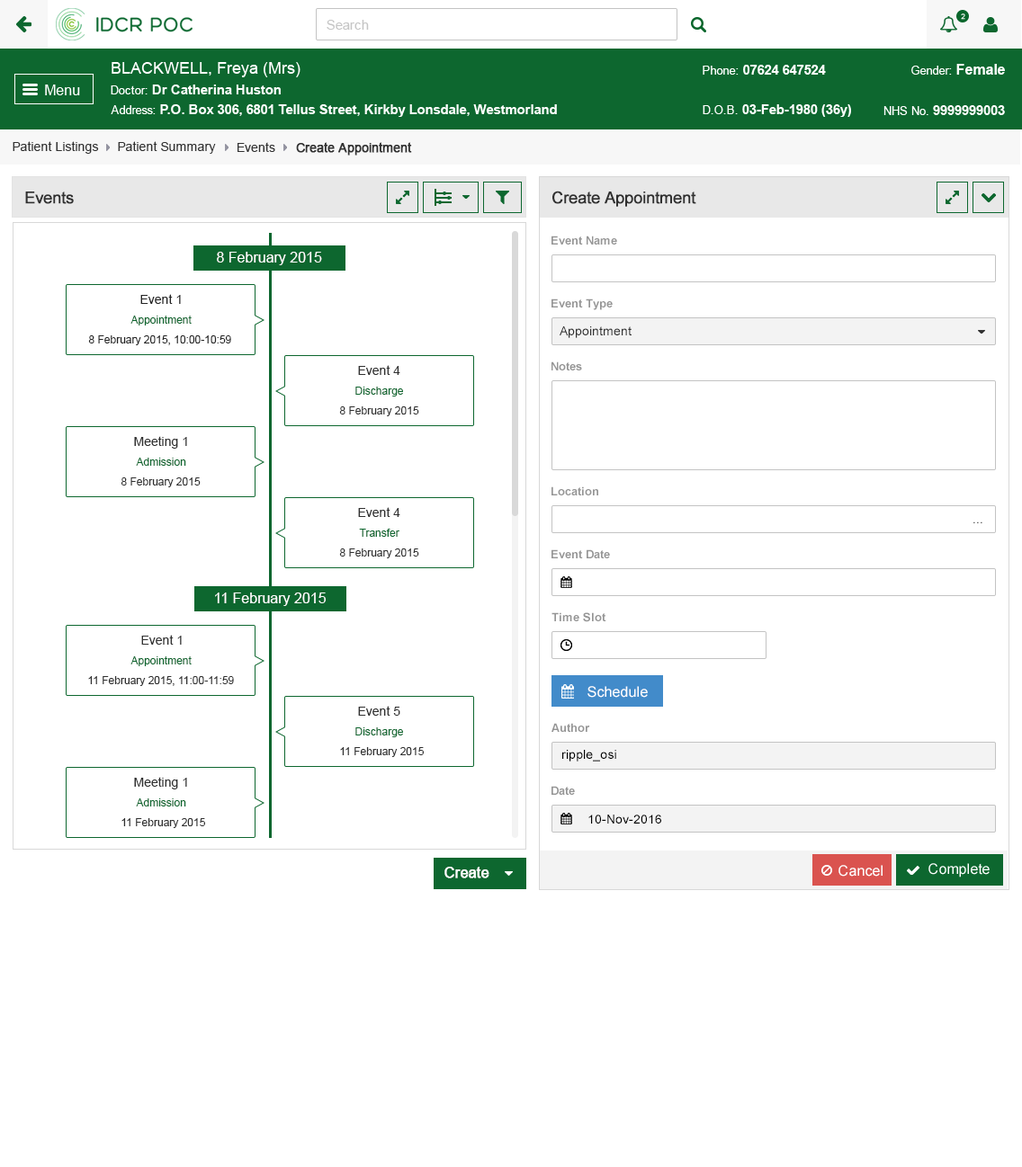
<style>
.page{position:relative;width:1022px;height:1167px;background:#ffffff}
.page>*{position:absolute;margin:0}
.t1{font:12.6px "ArialMT";color:#313131}
.t2{font:12.6px "ArialMT";color:#313131;font-weight:bold}
.t3{font:16.2px "ArialMT";color:#303030;font-weight:bold}
.t4{font:11.7px "Arial-BoldMT";color:#959595}
.t5{font:14.4px "ArialMT";color:#ffffff}
.t6{font:12.6px "ArialMT";color:#242424}
.t7{font:10.8px "ArialMT";color:#0d672f}
.t8{font:12.6px "ArialMT";color:#303030}
.t9{font:10.8px "ArialMT";color:#242424}
.t10{font:10.8px "ArialMT";color:#303030}
.t11{font:12.6px "ArialMT"}
.t12{font:12.6px "ArialMT";color:#000000}
.t13{font:14.4px "ArialMT";color:#ffffff;font-weight:bold}
</style>
<div class="page">
<p class="t1" style="left:13px;top:141px;width:86px;height:13px">Patient Listings</p>
<p class="t1" style="left:118px;top:141px;width:98px;height:13px">Patient Summary</p>
<p class="t1" style="left:237px;top:142px;width:38px;height:10px">Events</p>
<p class="t2" style="left:296px;top:142px;width:116px;height:14px">Create Appointment</p>
<p class="t3" style="left:25px;top:192px;width:49px;height:12px">Events</p>
<p class="t3" style="left:552px;top:191px;width:144px;height:16px">Create Appointment</p>
<p class="t4" style="left:551px;top:236px;width:66px;height:9px">Event Name</p>
<p class="t5" style="left:217px;top:252px;width:105px;height:13px">8 February 2015</p>
<p class="t6" style="left:140px;top:294px;width:41px;height:10px">Event 1</p>
<p class="t4" style="left:551px;top:299px;width:61px;height:11px">Event Type</p>
<p class="t7" style="left:130px;top:316px;width:62px;height:10px">Appointment</p>
<p class="t8" style="left:559px;top:326px;width:72px;height:12px">Appointment</p>
<p class="t9" style="left:88px;top:335px;width:143px;height:10px">8 February 2015, 10:00-10:59</p>
<p class="t8" style="left:358px;top:365px;width:42px;height:10px">Event 4</p>
<p class="t4" style="left:551px;top:362px;width:31px;height:8px">Notes</p>
<p class="t7" style="left:355px;top:387px;width:48px;height:10px">Discharge</p>
<p class="t10" style="left:339px;top:406px;width:80px;height:10px">8 February 2015</p>
<p class="t8" style="left:134px;top:436px;width:53px;height:13px">Meeting 1</p>
<p class="t7" style="left:136px;top:458px;width:50px;height:8px">Admission</p>
<p class="t10" style="left:121px;top:478px;width:80px;height:9px">8 February 2015</p>
<p class="t4" style="left:551px;top:487px;width:47px;height:8px">Location</p>
<p class="t8" style="left:358px;top:507px;width:42px;height:10px">Event 4</p>
<p class="t11" style="left:973px;top:522px;width:9px;height:1px">...</p>
<p class="t7" style="left:359px;top:529px;width:40px;height:8px">Transfer</p>
<p class="t10" style="left:339px;top:549px;width:80px;height:9px">8 February 2015</p>
<p class="t4" style="left:551px;top:549px;width:59px;height:9px">Event Date</p>
<p class="t5" style="left:215px;top:593px;width:111px;height:13px">11 February 2015</p>
<p class="t4" style="left:551px;top:612px;width:55px;height:10px">Time Slot</p>
<p class="t8" style="left:141px;top:635px;width:41px;height:10px">Event 1</p>
<p class="t7" style="left:130px;top:656px;width:62px;height:10px">Appointment</p>
<p class="t10" style="left:88px;top:676px;width:146px;height:10px">11 February 2015, 11:00-11:59</p>
<p class="t5" style="left:587px;top:686px;width:60px;height:12px">Schedule</p>
<p class="t8" style="left:358px;top:706px;width:42px;height:10px">Event 5</p>
<p class="t4" style="left:551px;top:723px;width:39px;height:9px">Author</p>
<p class="t7" style="left:355px;top:728px;width:48px;height:9px">Discharge</p>
<p class="t10" style="left:340px;top:747px;width:84px;height:10px">11 February 2015</p>
<p class="t12" style="left:562px;top:750px;width:54px;height:12px">ripple_osi</p>
<p class="t8" style="left:134px;top:777px;width:53px;height:13px">Meeting 1</p>
<p class="t4" style="left:551px;top:786px;width:24px;height:9px">Date</p>
<p class="t7" style="left:136px;top:799px;width:50px;height:8px">Admission</p>
<p class="t10" style="left:121px;top:818px;width:84px;height:10px">11 February 2015</p>
<p class="t12" style="left:588px;top:815px;width:73px;height:9px">10-Nov-2016</p>
<p class="t13" style="left:444px;top:867px;width:45px;height:12px">Create</p>
</div>
